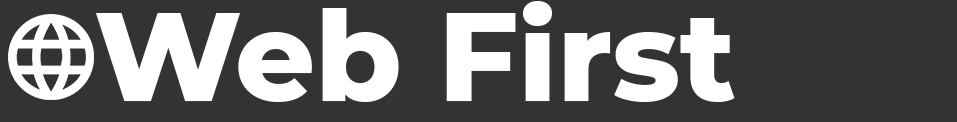
<style>
.page{position:relative;width:957px;height:122px;background:#333333}
.page>*{position:absolute;margin:0}
.t1{font:125px "Montserrat-ExtraBold";color:#ffffff}
</style>
<div class="page">
<p class="t1" style="left:96px;top:1px;width:639px;height:101px">Web First</p>
</div>
